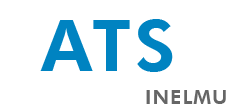
<style>
.page{position:relative;width:233px;height:108px;background:#ffffff}
.page>*{position:absolute;margin:0}
.t1{font:72px "FuturaBT-Heavy";letter-spacing:0.05em;color:#0083c1}
.t2{font:20px "FuturaBT-Heavy";letter-spacing:0.05em;color:#666666}
</style>
<div class="page">
<p class="t1" style="left:40px;top:19px;width:133px;height:53px">ATS</p>
<p class="t2" style="left:146px;top:90px;width:80px;height:14px">INELMU</p>
</div>
